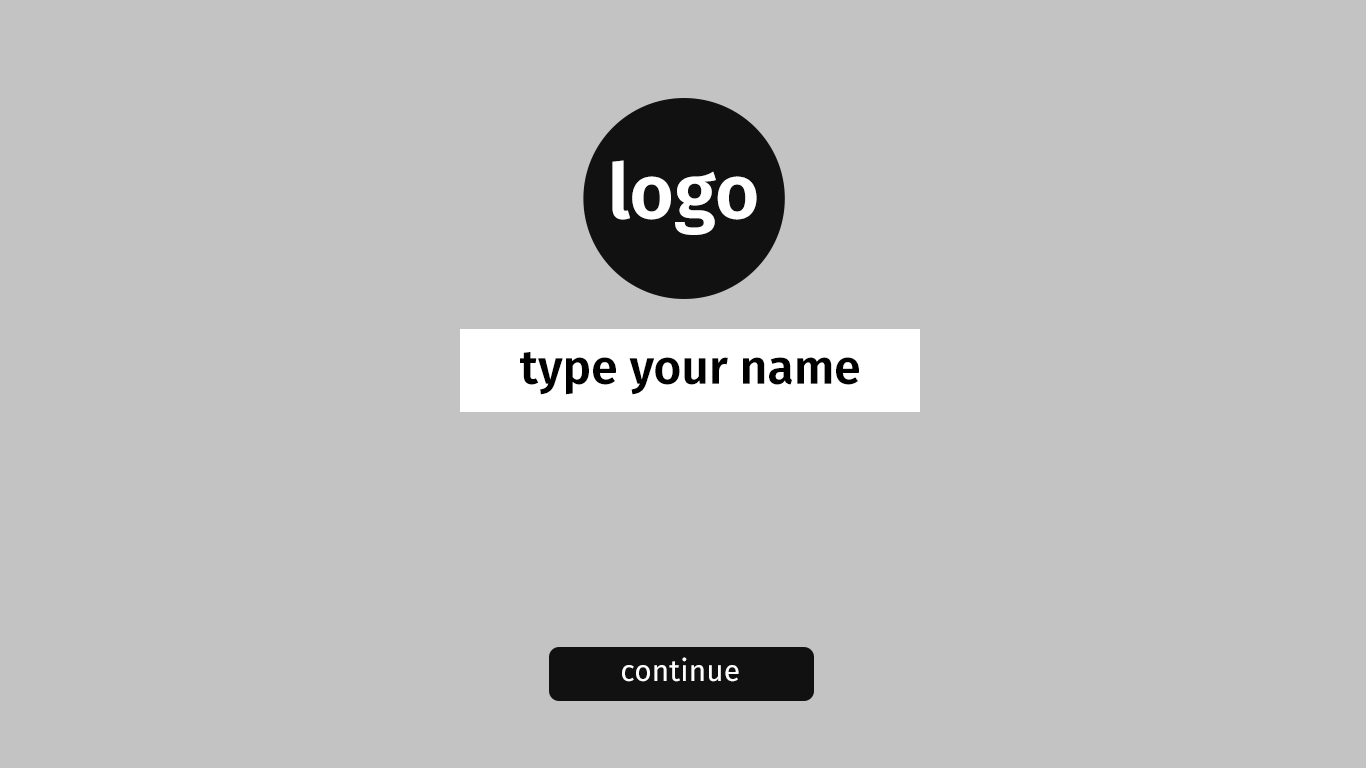
<style>
.page{position:relative;width:1366px;height:768px;background:#c3c3c3}
.page>*{position:absolute;margin:0}
.t1{font:76.6px "FiraSans-SemiBold";color:#ffffff}
.t2{font:48px "FiraSans-SemiBold";color:#000000}
.t3{font:30px "FiraSans-Regular";color:#ffffff}
</style>
<div class="page">
<p class="t1" style="left:612px;top:160px;width:145px;height:75px">logo</p>
<p class="t2" style="left:520px;top:352px;width:339px;height:43px">type your name</p>
<p class="t3" style="left:622px;top:657px;width:117px;height:25px">continue</p>
</div>
